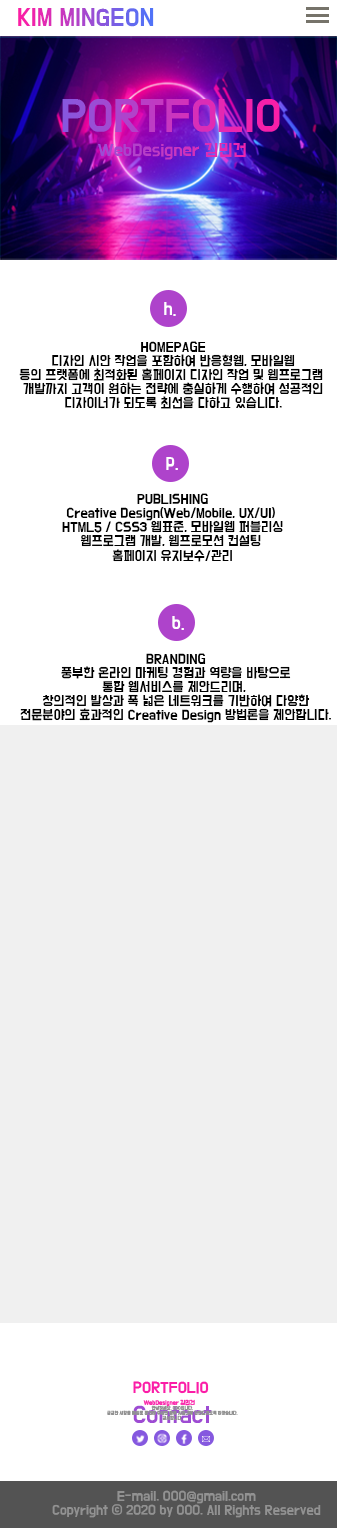
<style>
.page{position:relative;width:337px;height:1528px;background:#f0f0f0}
.page>*{position:absolute;margin:0}
.t1{font:21px "BMDoHyeon"}
.t2{font:38.6px "BMDoHyeon"}
.t3{font:14.9px "BMDoHyeon"}
.t4{font:15px "BMDoHyeon";color:#ffffff}
.t5{font:11.7px "BMDoHyeon";color:#000000}
.t6{font:11.7px/0.9px "BMDoHyeon";color:#000000}
.t7{font:13.2px "BMDoHyeon";color:#fb1da7}
.t8{font:3.9px "BMDoHyeon";color:#929292}
.t9{font:20.4px "BMDoHyeon";color:#9e4bd3}
.t10{font:5.1px "BMDoHyeon";color:#fb1da7}
.t11{font:11.6px "BMDoHyeon";color:#929292}
</style>
<div class="page">
<p class="t1" style="left:18px;top:8px;width:136px;height:19px">KIM MINGEON</p>
<p class="t2" style="left:62px;top:99px;width:218px;height:33px">PORTFOLIO</p>
<p class="t3" style="left:98px;top:143px;width:148px;height:17px">WebDesigner 김민건</p>
<p class="t4" style="left:164px;top:302px;width:12px;height:14px">h.</p>
<p class="t5" style="left:19px;top:341px;width:304px;height:68px;text-align:center"><span class="t6">HOMEPAGE<br></span>디자인 시안 작업을 포함하여 반응형웹, 모바일웹<br>등의 프랫폼에 최적화된 홈페이지 디자인 작업 및 웹프로그램 <br>개발까지 고객이 원하는 전략에 충실하게 수행하여 성공적인<br>디자이너가 되도록 최선을 다하고 있습니다.</p>
<p class="t4" style="left:166px;top:457px;width:12px;height:13px">p.</p>
<p class="t5" style="left:62px;top:493px;width:221px;height:69px;text-align:center">PUBLISHING<br>Creative Design(Web/Mobile, UX/UI) <br>HTML5 / CSS3 웹표준, 모바일웹 퍼블리싱<br>웹프로그램 개발, 웹프로모션 컨설팅 <br>홈페이지 유지보수/관리</p>
<p class="t4" style="left:172px;top:616px;width:12px;height:14px">b.</p>
<p class="t5" style="left:20px;top:653px;width:311px;height:70px;text-align:center">BRANDING<br>풍부한 온라인 마케팅 경험과 역량을 바탕으로<br>통합 웹서비스를 제안드리며, <br>창의적인 발상과 폭 넓은 네트워크를 기반하여 다양한<br>전문분야의 효과적인 Creative Design 방법론을 제안합니다.</p>
<p class="t7" style="left:133px;top:1381px;width:76px;height:13px">PORTFOLIO</p>
<p class="t8" style="left:107px;top:1405px;width:131px;height:15px;text-align:center">안녕하세요. 000입니다.<br>궁금한 사항을 메일로 문의해 주시면 빠른 시일내에 답변드리도록 하겠습니다.<br>감사합니다.</p>
<p class="t9" style="left:133px;top:1405px;width:79px;height:18px">Contact</p>
<p class="t10" style="left:143px;top:1399px;width:52px;height:8px">WebDesigner 김민건</p>
<p class="t11" style="left:52px;top:1490px;width:269px;height:28px;text-align:center">E-mail. 000@gmail.com<br>Copyright ⓒ 2020 by 000. All Rights Reserved</p>
</div>
